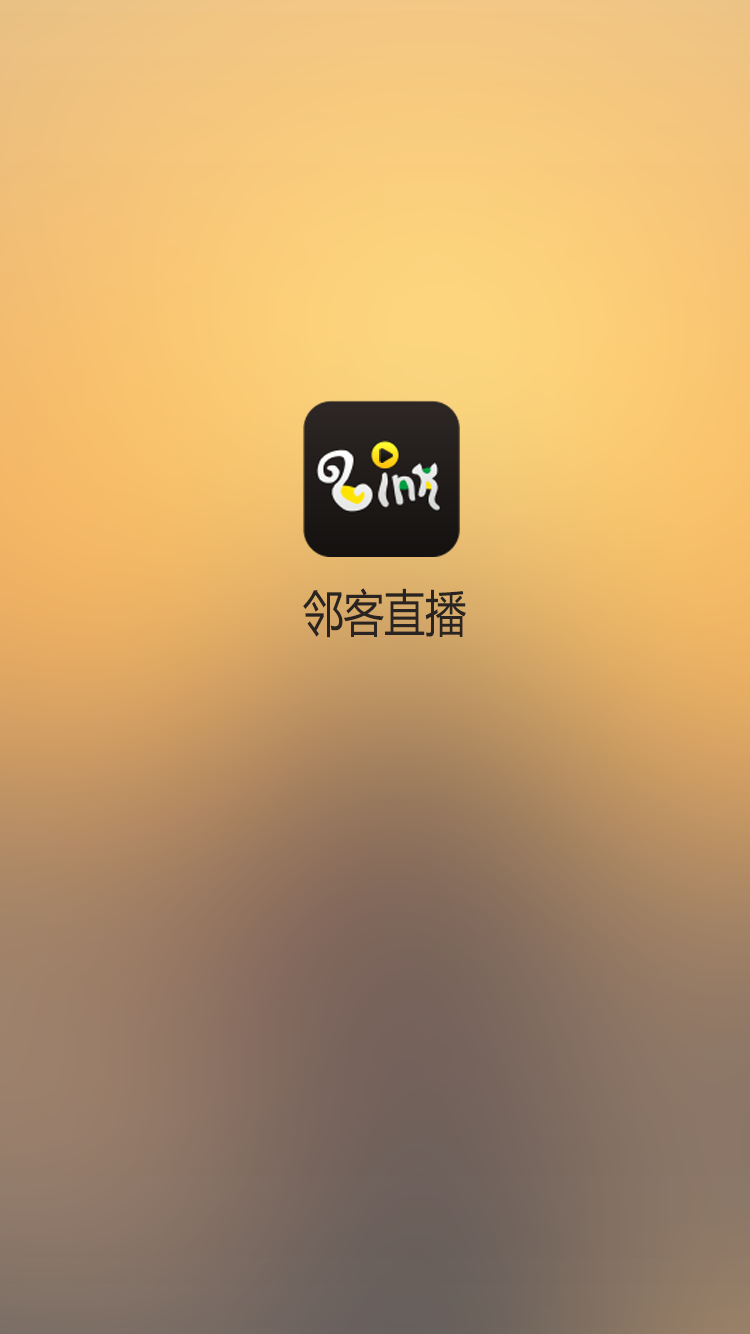
<style>
.page{position:relative;width:750px;height:1334px}
.page>*{position:absolute;margin:0}
.t1{font:50px "MicrosoftYaHei";color:#292321;scale:0.82 1}
</style>
<div class="page">
<p class="t1" style="left:303px;top:588px;width:163px;height:50px">邻客直播</p>
</div>
